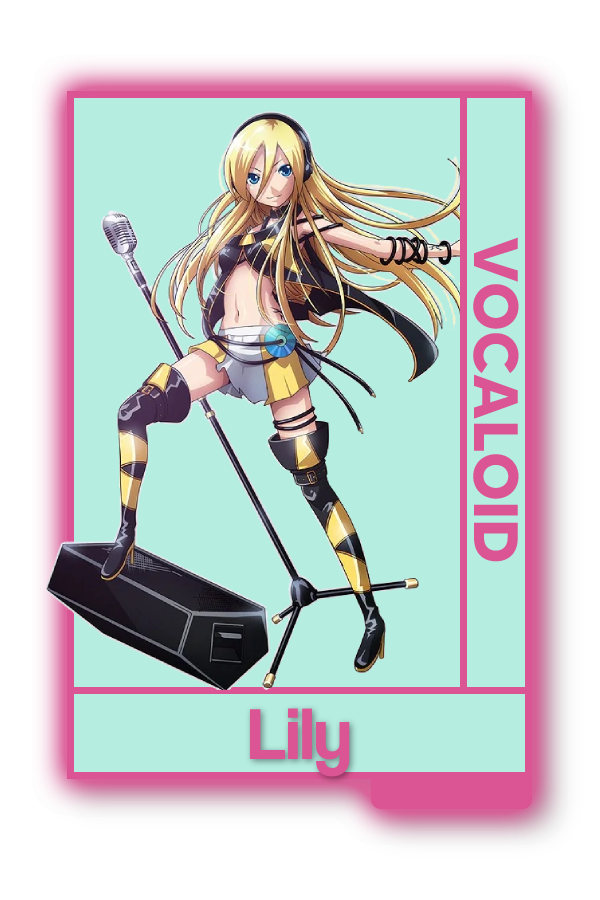
<style>
.page{position:relative;width:600px;height:900px;background:#b5ede1}
.page>*{position:absolute;margin:0}
.t1{font:62.5px "MADETOMMY-Bold";color:#db5493}
.t2{font:75px "CoolveticaRg-Regular";color:#db5493}
</style>
<div class="page">
<p class="t1" style="left:473px;top:237px;width:46px;height:325px;rotate:90deg">VOCALOID</p>
<p class="t2" style="left:249px;top:708px;width:101px;height:69px">Lily</p>
</div>
